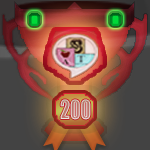
<style>
.page{position:relative;width:150px;height:150px}
.page>*{position:absolute;margin:0}
.t1{font:24.2px "Impact";scale:0.82 1}
</style>
<div class="page">
<p class="t1" style="left:60px;top:99px;width:31px;height:21px">200</p>
</div>
